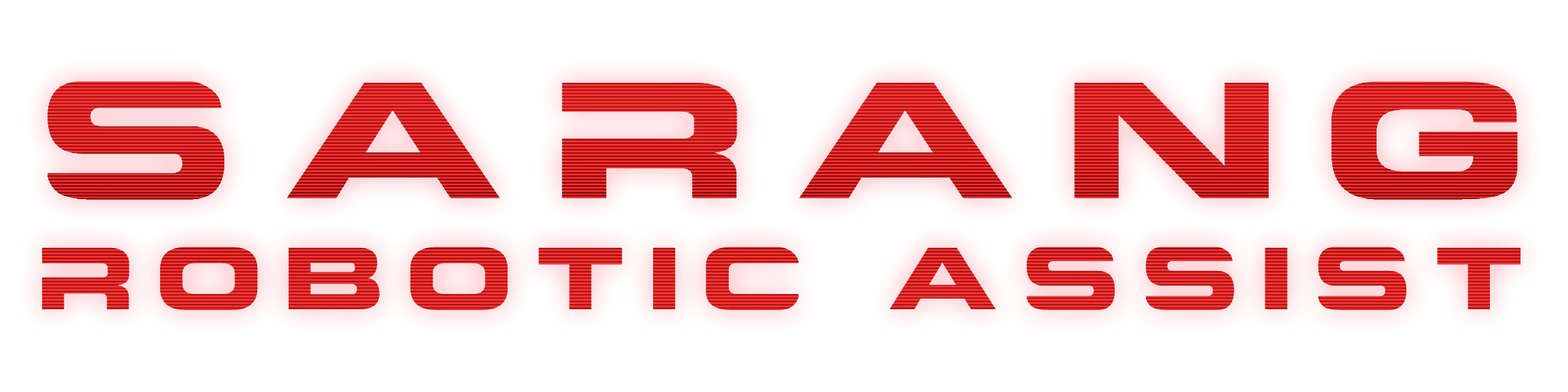
<style>
.page{position:relative;width:1568px;height:392px;background:#ffffff}
.page>*{position:absolute;margin:0}
.t1{font:158.7px "Criovision-Font";letter-spacing:0.12em;scale:1.24 1}
.t2{font:84.7px "Criovision-Font";letter-spacing:0.12em;scale:1.16 1}
</style>
<div class="page">
<p class="t1" style="left:47px;top:81px;width:1470px;height:119px">SARANG</p>
<p class="t2" style="left:42px;top:247px;width:1479px;height:63px">ROBOTIC ASSIST</p>
</div>
